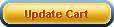
<style>
.page{position:relative;width:114px;height:27px}
.page>*{position:absolute;margin:0}
.t1{font:11px "Arial-BoldMT";color:#cc3300}
</style>
<div class="page">
<p class="t1" style="left:25px;top:10px;width:63px;height:10px">Update Cart</p>
</div>
